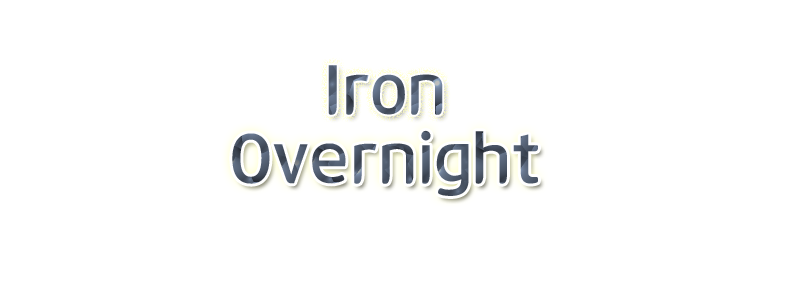
<style>
.page{position:relative;width:800px;height:300px;background:#ffffff}
.page>*{position:absolute;margin:0}
.t1{font:70px "12LotteMartDreamBold"}
.t2{font:70px "12LotteMartDreamBold";color:#4b5767}
</style>
<div class="page">
<p class="t1" style="left:328px;top:65px;width:115px;height:50px">Iron</p>
<p class="t2" style="left:232px;top:130px;width:306px;height:66px">Overnight</p>
</div>
